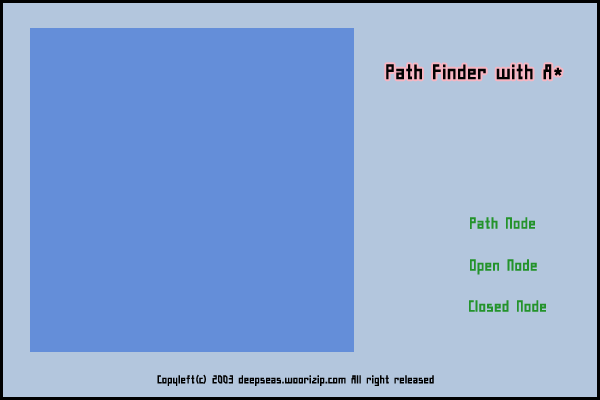
<style>
.page{position:relative;width:600px;height:400px;background:#b3c6dd}
.page>*{position:absolute;margin:0}
.t1{font:26px "H2sa1M";color:#010101}
.t2{font:20px "H2sa1M";color:#23932b}
.t3{font:14px "H2sa1M";color:#000000}
</style>
<div class="page">
<p class="t1" style="left:386px;top:64px;width:176px;height:16px">Path Finder with A*</p>
<p class="t2" style="left:470px;top:217px;width:65px;height:12px">Path Node</p>
<p class="t2" style="left:470px;top:259px;width:67px;height:16px">Open Node</p>
<p class="t2" style="left:469px;top:300px;width:77px;height:12px">Closed Node</p>
<p class="t3" style="left:157px;top:374px;width:277px;height:12px">Copyleft(c) 2003 deepseas.woorizip.com All right released</p>
</div>
